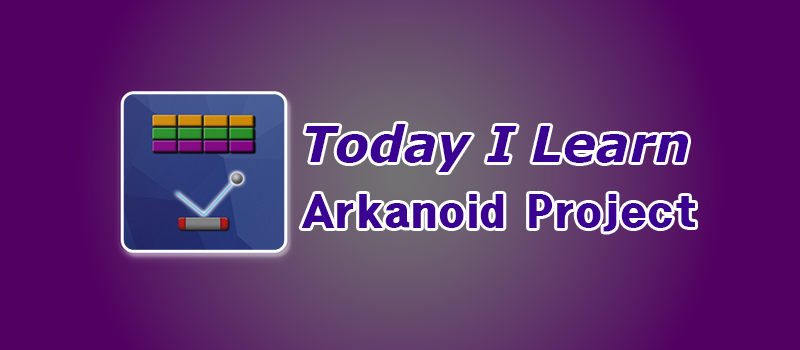
<style>
.page{position:relative;width:800px;height:350px;background:#520061}
.page>*{position:absolute;margin:0}
.t1{font:50px "Verdana-BoldItalic";color:#390091}
.t2{font:38px "HeadlineR-HM";color:#390091}
</style>
<div class="page">
<p class="t1" style="left:305px;top:124px;width:383px;height:48px">Today I Learn</p>
<p class="t2" style="left:301px;top:194px;width:394px;height:38px">Arkanoid Project</p>
</div>
